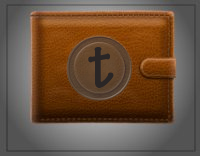
<style>
.page{position:relative;width:200px;height:156px}
.page>*{position:absolute;margin:0}
.t1{font:70px "TektonPro-BoldCond";color:#2a2626}
</style>
<div class="page">
<p class="t1" style="left:88px;top:47px;width:26px;height:41px">t</p>
</div>
